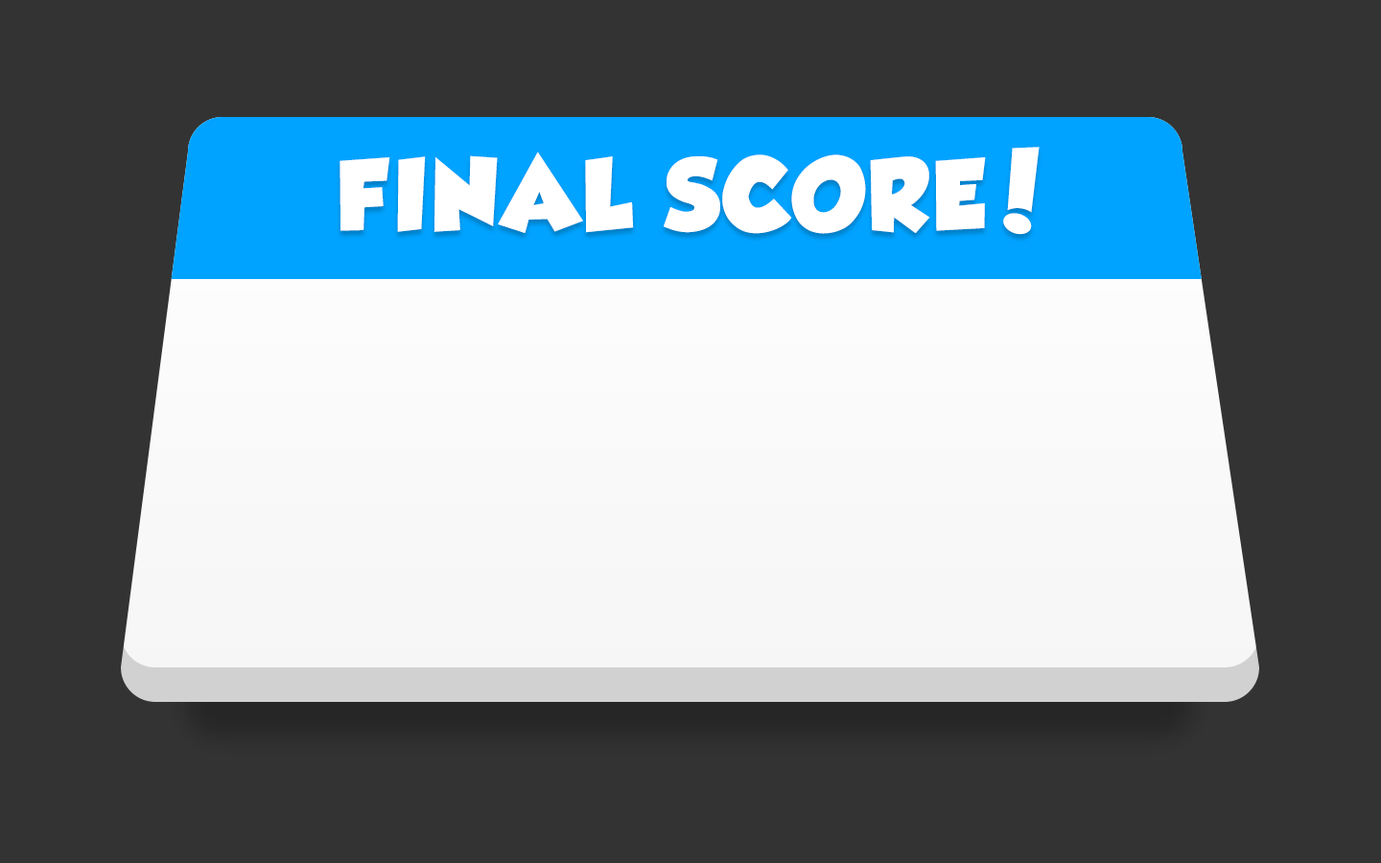
<style>
.page{position:relative;width:1381px;height:863px;background:#333333}
.page>*{position:absolute;margin:0}
.t1{font:89.2px "GROBOLD";letter-spacing:0.04em;color:#ffffff;text-transform:uppercase}
</style>
<div class="page">
<p class="t1" style="left:340px;top:147px;width:700px;height:88px">Final Score!</p>
</div>
